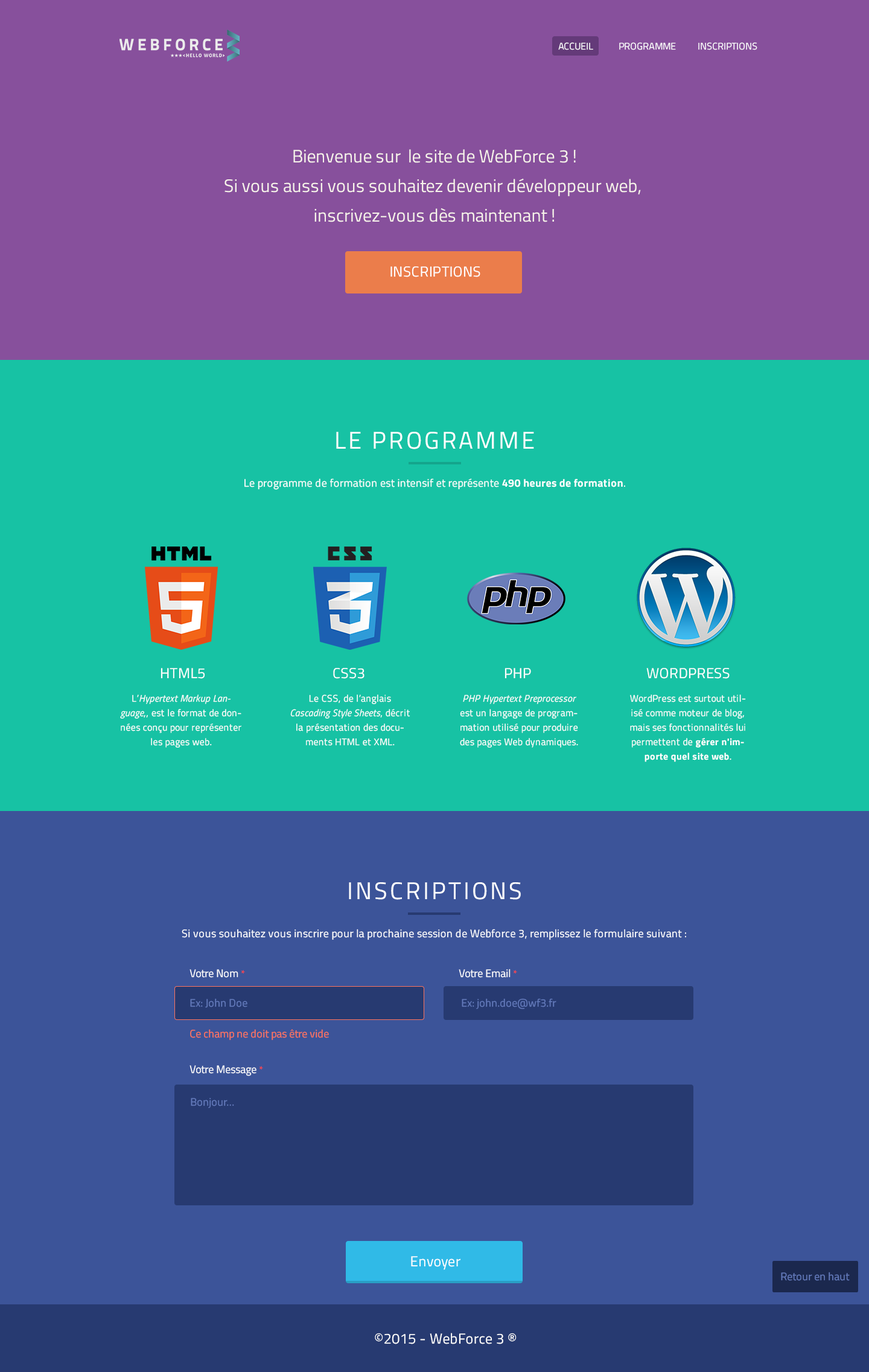
<style>
.page{position:relative;width:869px;height:1372px;background:#17c2a4}
.page>*{position:absolute;margin:0}
.t1{font:9.7px "TitilliumWeb-Regular";color:#ffffff;text-transform:uppercase}
.t2{font:18.1px/29.5px "TitilliumWeb-Regular";color:#f7f3ea}
.t3{font:14.5px "TitilliumWeb-Regular";letter-spacing:0.02em;color:#ffffff}
.t4{font:24.1px "TitilliumWeb-Regular";letter-spacing:0.1em;color:#ffffff}
.t5{font:10.9px "TitilliumWeb-Regular";letter-spacing:0.02em;color:#ffffff}
.t6{font:10.9px "TitilliumWeb-Bold";letter-spacing:0.02em;color:#ffffff}
.t7{font:14.5px "TitilliumWeb-Regular";letter-spacing:0.02em;color:#ffffff;text-transform:uppercase}
.t8{font:9.7px/14.5px "TitilliumWeb-Regular";letter-spacing:0.02em;color:#ffffff}
.t9{font:9.7px/14.5px "TitilliumWeb-Italic";letter-spacing:0.02em;color:#ffffff}
.t10{font:9.7px/14.5px "TitilliumWeb-Bold";letter-spacing:0.02em;color:#ffffff}
.t11{font:10.9px "TitilliumWeb-Regular";color:#ffffff}
.t12{font:9.7px "TitilliumWeb-Regular";color:#ff4444}
.t13{font:10.9px "TitilliumWeb-Regular";color:#647bbd}
.t14{font:10.9px "TitilliumWeb-Regular";color:#ff745d}
</style>
<div class="page">
<p class="t1" style="left:558px;top:42px;width:35px;height:8px">Accueil</p>
<p class="t1" style="left:619px;top:42px;width:57px;height:8px">PROGRAMME</p>
<p class="t1" style="left:698px;top:42px;width:60px;height:8px">INSCRIPTIONS</p>
<p class="t2" style="left:225px;top:149px;width:416px;height:73px;text-align:center">Bienvenue sur  le site de WebForce 3 !<br>Si vous aussi vous souhaitez devenir développeur web, <br>inscrivez-vous dès maintenant !</p>
<p class="t3" style="left:391px;top:266px;width:90px;height:11px">INSCRIPTIONS</p>
<p class="t4" style="left:336px;top:432px;width:198px;height:17px">LE PROGRAMME</p>
<p class="t5" style="left:245px;top:478px;width:380px;height:12px">Le programme de formation est intensif et représente <span class="t6">490 heures de formation</span>.</p>
<p class="t7" style="left:161px;top:668px;width:44px;height:11px">HTML5</p>
<p class="t7" style="left:333px;top:668px;width:32px;height:11px">CSS3</p>
<p class="t7" style="left:505px;top:668px;width:26px;height:11px">PHP</p>
<p class="t7" style="left:647px;top:668px;width:83px;height:11px">Wordpress</p>
<p class="t8" style="left:120px;top:694px;width:121px;height:53px;text-align:center">L’<span class="t9">Hypertext Markup Language</span>,, est le format de données conçu pour représenter les pages web.</p>
<p class="t8" style="left:290px;top:694px;width:121px;height:52px;text-align:center">Le CSS, de l’anglais <br><span class="t9">Cascading Style Sheets</span>, décrit la présentation des documents HTML et XML.</p>
<p class="t8" style="left:460px;top:694px;width:118px;height:53px;text-align:center"><span class="t9">PHP Hypertext Preprocessor</span> est un langage de programmation utilisé pour produire des pages Web dynamiques.</p>
<p class="t8" style="left:630px;top:694px;width:116px;height:68px;text-align:center">WordPress est surtout utilisé comme moteur de blog, mais ses fonctionnalités lui permettent de <span class="t10">gérer n'importe quel site web</span>.</p>
<p class="t4" style="left:349px;top:882px;width:172px;height:18px">INSCRIPTIONS</p>
<p class="t5" style="left:182px;top:929px;width:504px;height:11px">Si vous souhaitez vous inscrire pour la prochaine session de Webforce 3, remplissez le formulaire suivant :</p>
<p class="t11" style="left:190px;top:969px;width:55px;height:8px">Votre Nom <span class="t12">*</span></p>
<p class="t11" style="left:459px;top:968px;width:58px;height:9px">Votre Email <span class="t12">*</span></p>
<p class="t13" style="left:190px;top:998px;width:58px;height:10px">Ex: John Doe</p>
<p class="t13" style="left:462px;top:998px;width:95px;height:11px">Ex: john.doe@wf3.fr</p>
<p class="t14" style="left:190px;top:1029px;width:139px;height:11px">Ce champ ne doit pas être vide</p>
<p class="t11" style="left:190px;top:1065px;width:73px;height:11px">Votre Message <span class="t12">*</span></p>
<p class="t13" style="left:191px;top:1098px;width:43px;height:10px">Bonjour…</p>
<p class="t3" style="left:411px;top:1256px;width:50px;height:14px">Envoyer</p>
<p class="t13" style="left:781px;top:1271px;width:69px;height:9px">Retour en haut</p>
<p class="t3" style="left:375px;top:1332px;width:142px;height:12px">©2015 - WebForce 3 ®</p>
</div>
